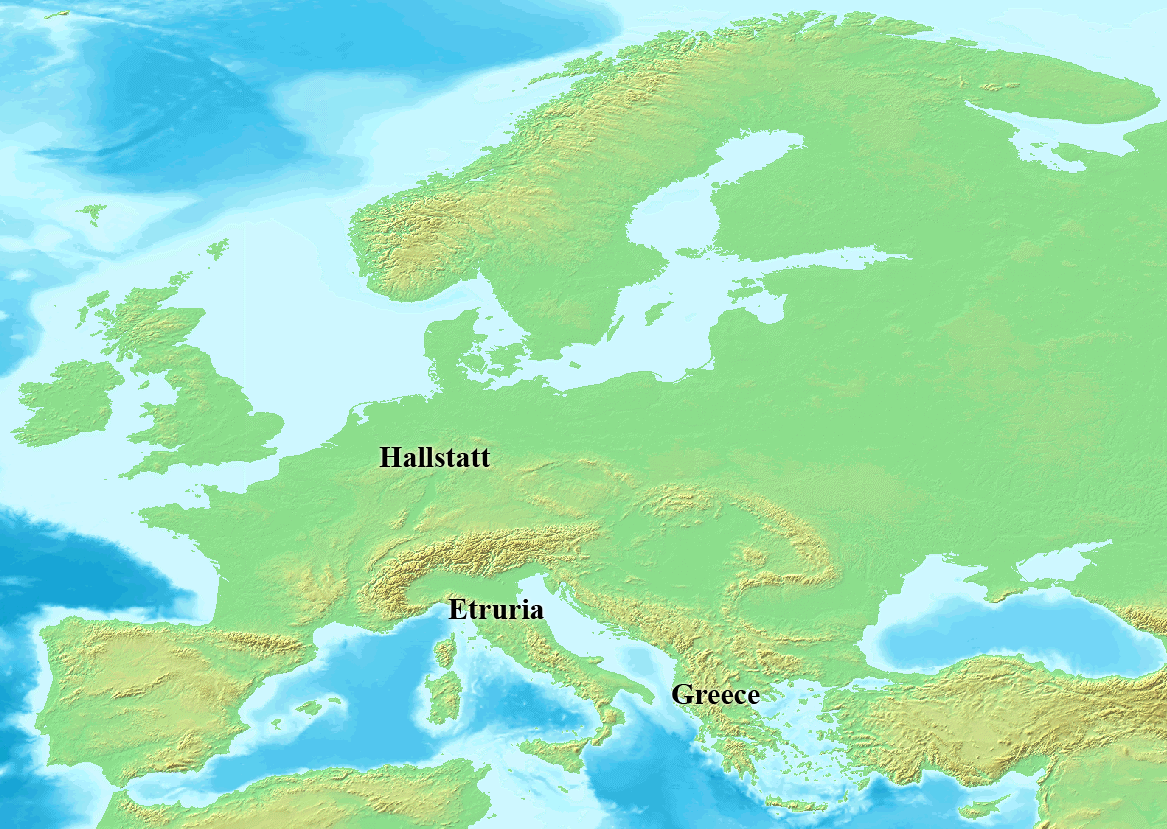
<style>
.page{position:relative;width:1167px;height:829px;background:#8cde8c}
.page>*{position:absolute;margin:0}
.t1{font:30px "TimesNewRomanPS-BoldMT";color:#000000}
</style>
<div class="page">
<p class="t1" style="left:379px;top:447px;width:112px;height:20px">Hallstatt</p>
<p class="t1" style="left:448px;top:599px;width:96px;height:20px">Etruria</p>
<p class="t1" style="left:672px;top:684px;width:88px;height:20px">Greece</p>
</div>
